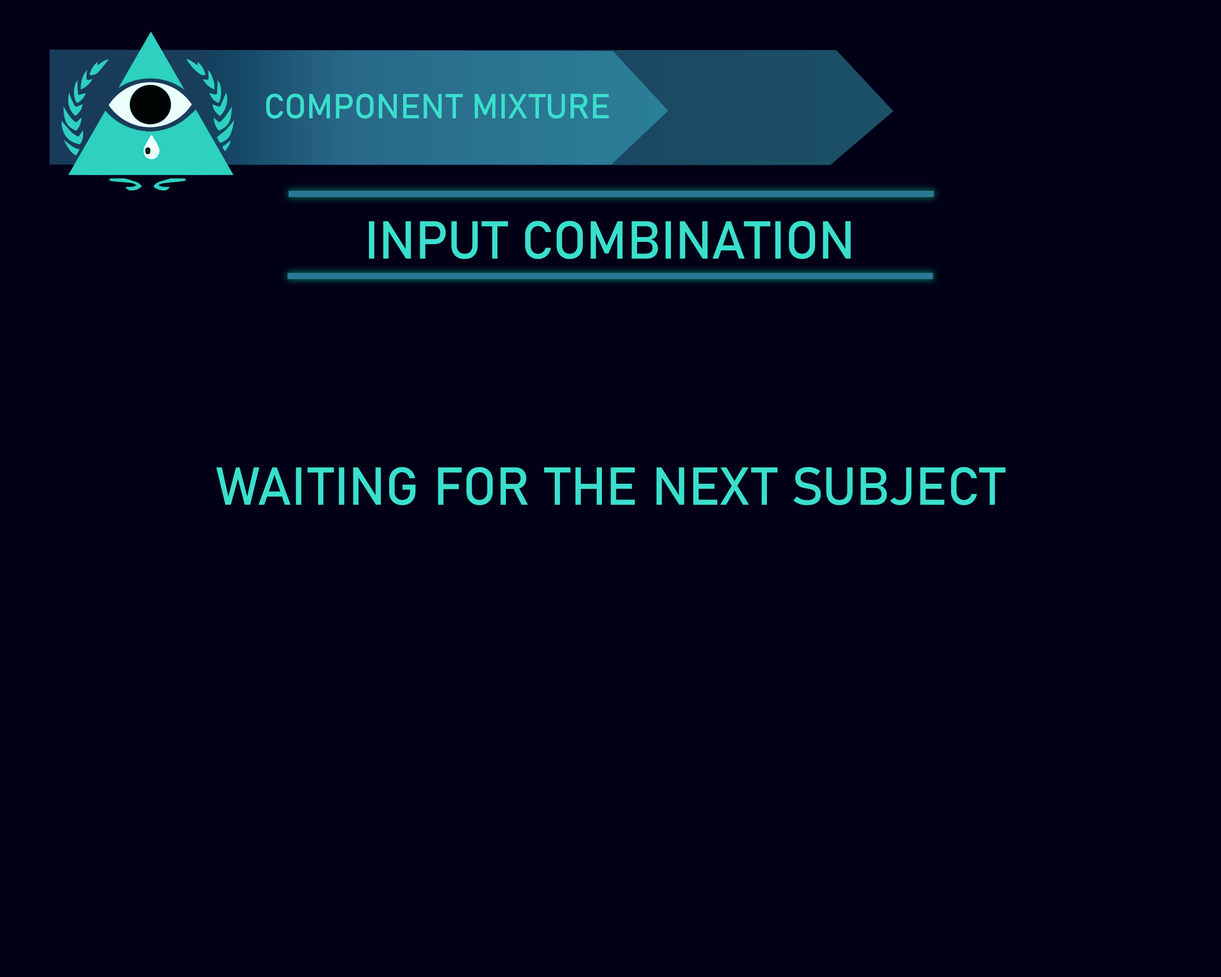
<style>
.page{position:relative;width:1221px;height:977px;background:#020017}
.page>*{position:absolute;margin:0}
.t1{font:34.3px "Bahnschrift";color:#3adfcc}
.t2{font:52.5px "Bahnschrift";color:#3adfcc}
</style>
<div class="page">
<p class="t1" style="left:266px;top:93px;width:343px;height:26px">COMPONENT MIXTURE</p>
<p class="t2" style="left:369px;top:221px;width:482px;height:38px">INPUT COMBINATION</p>
<p class="t2" style="left:216px;top:467px;width:790px;height:38px">WAITING FOR THE NEXT SUBJECT</p>
</div>
